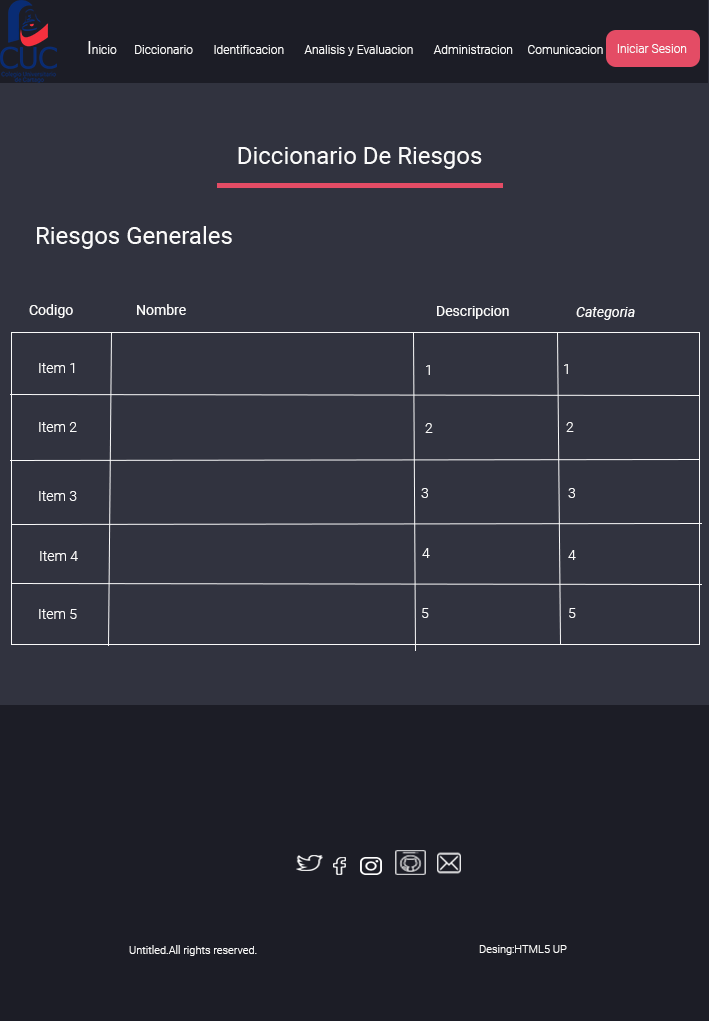
<style>
.page{position:relative;width:709px;height:1021px;background:#31333f}
.page>*{position:absolute;margin:0}
.t1{font:12px "Roboto-Light";color:#fafafa}
.t2{font:18px "Roboto-Light";color:#fafafa}
.t3{font:24px "Roboto-Regular";color:#fafafa}
.t4{font:24px "Roboto-Regular";color:#e44c65}
.t5{font:14px "Roboto-Regular";color:#fafafa}
.t6{font:14px "Roboto-Italic";color:#fafafa}
.t7{font:14px "Roboto-Light";color:#fafafa}
.t8{font:11px "Roboto-Light";color:#fafafa}
</style>
<div class="page">
<p class="t1" style="left:88px;top:41px;width:515px;height:15px"><span class="t2">I</span>nicio      Diccionario       Identificacion       Analisis y Evaluacion       Administracion     Comunicacion</p>
<p class="t1" style="left:617px;top:44px;width:70px;height:9px">Iniciar Sesion</p>
<p class="t3" style="left:238px;top:147px;width:244px;height:22px"><span class="t4">                      </span>Diccionario De Riesgos</p>
<p class="t3" style="left:37px;top:226px;width:195px;height:23px">Riesgos Generales</p>
<p class="t5" style="left:29px;top:304px;width:44px;height:14px">Codigo</p>
<p class="t5" style="left:137px;top:304px;width:49px;height:11px">Nombre</p>
<p class="t5" style="left:437px;top:306px;width:72px;height:13px">Descripcion</p>
<p class="t6" style="left:576px;top:307px;width:59px;height:13px">Categoria</p>
<p class="t7" style="left:39px;top:363px;width:36px;height:10px">Item 1</p>
<p class="t7" style="left:426px;top:365px;width:4px;height:10px">1</p>
<p class="t7" style="left:564px;top:364px;width:4px;height:10px">1</p>
<p class="t7" style="left:39px;top:422px;width:38px;height:10px">Item 2</p>
<p class="t7" style="left:425px;top:423px;width:8px;height:10px">2</p>
<p class="t7" style="left:566px;top:422px;width:8px;height:10px">2</p>
<p class="t7" style="left:39px;top:491px;width:38px;height:10px">Item 3</p>
<p class="t7" style="left:421px;top:488px;width:7px;height:10px">3</p>
<p class="t7" style="left:568px;top:488px;width:7px;height:10px">3</p>
<p class="t7" style="left:40px;top:551px;width:38px;height:10px">Item 4</p>
<p class="t7" style="left:422px;top:548px;width:8px;height:10px">4</p>
<p class="t7" style="left:568px;top:550px;width:8px;height:10px">4</p>
<p class="t7" style="left:39px;top:609px;width:38px;height:10px">Item 5</p>
<p class="t7" style="left:422px;top:608px;width:7px;height:10px">5</p>
<p class="t7" style="left:569px;top:608px;width:7px;height:10px">5</p>
<p class="t8" style="left:129px;top:945px;width:128px;height:11px">Untitled.All rights reserved.</p>
<p class="t8" style="left:479px;top:945px;width:88px;height:10px">Desing:HTML5 UP</p>
</div>
